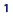
<style>
.page{position:relative;width:13px;height:16px;background:#ffffff}
.page>*{position:absolute;margin:0}
.t1{font:12px "MyriadPro-Regular";color:#19196f;font-weight:bold}
</style>
<div class="page">
<p class="t1" style="left:4px;top:4px;width:4px;height:9px">1</p>
</div>
